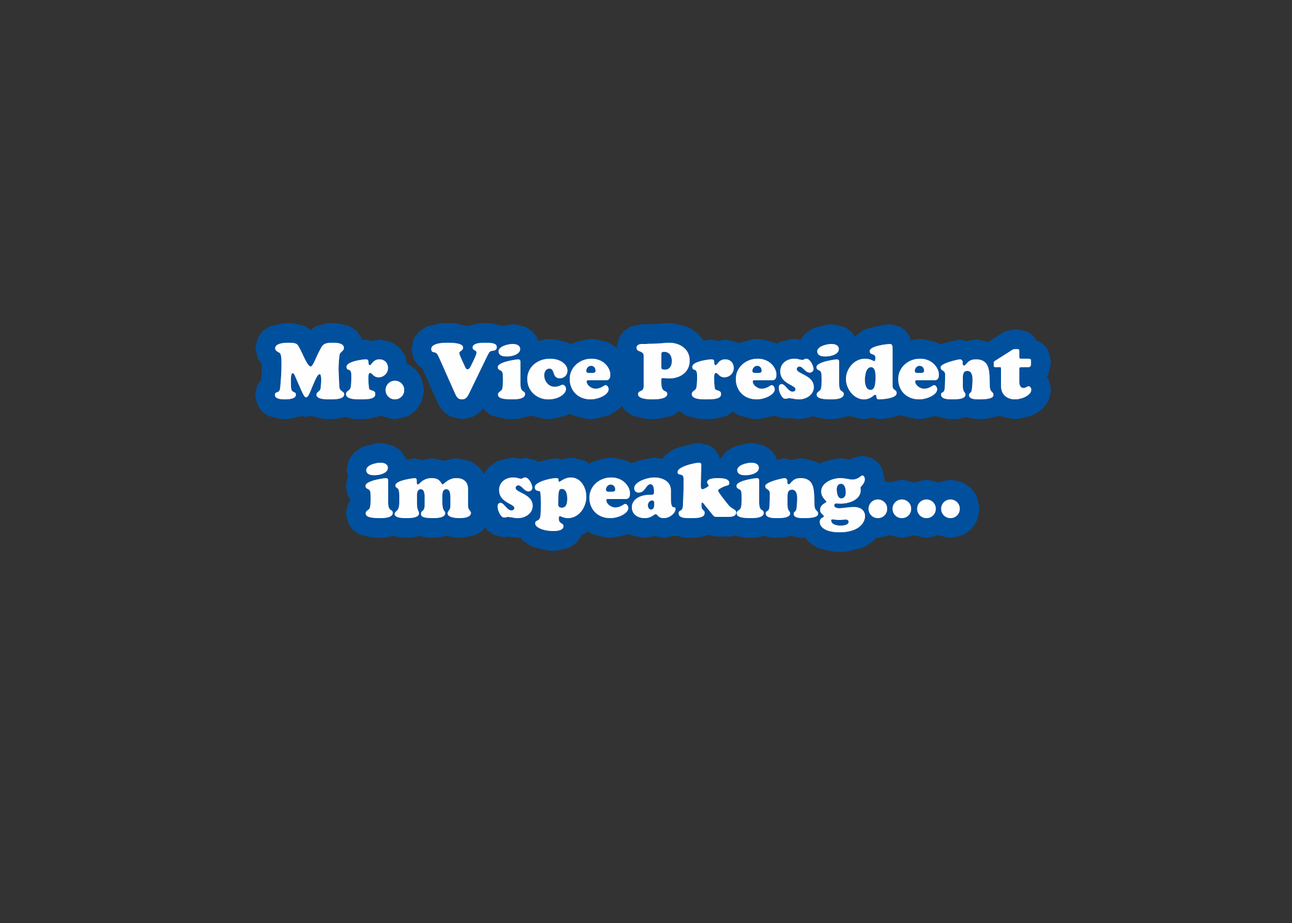
<style>
.page{position:relative;width:1292px;height:923px;background:#333333}
.page>*{position:absolute;margin:0}
.t1{font:76.9px "CooperBlackStd";color:#fffefe}
</style>
<div class="page">
<p class="t1" style="left:274px;top:343px;width:758px;height:57px">Mr. Vice President</p>
<p class="t1" style="left:365px;top:463px;width:595px;height:69px">im speaking....</p>
</div>
